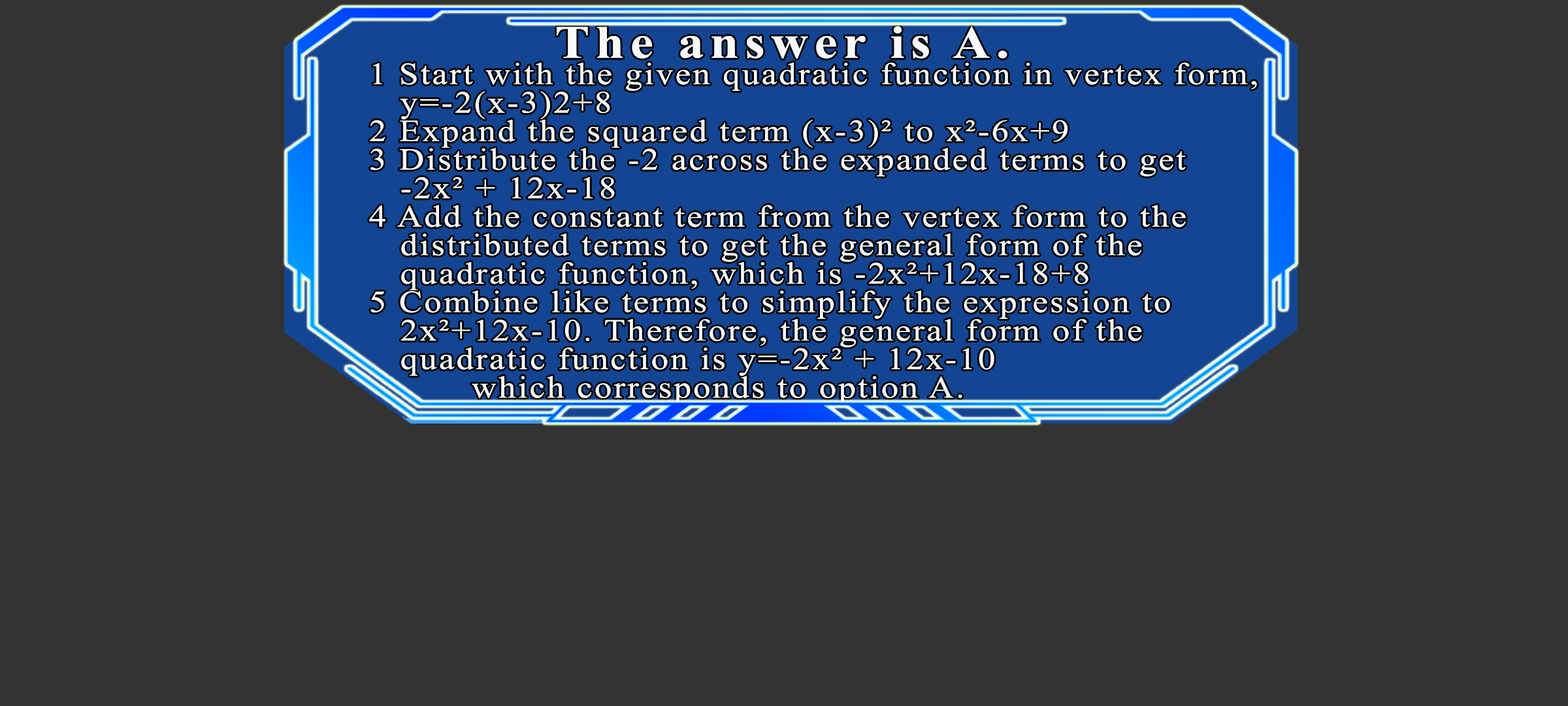
<style>
.page{position:relative;width:1568px;height:706px;background:#333333}
.page>*{position:absolute;margin:0}
.t1{font:46.3px "TimesNewRomanPS-BoldMT";letter-spacing:0.115em;color:#f7f9fb;scale:1.12 1}
.t2{font:30.9px/28.5px "TimesNewRomanPSMT";letter-spacing:0.06em;color:#f7f9fb;scale:1.12 1}
</style>
<div class="page">
<p class="t1" style="left:557px;top:26px;width:450px;height:33px">The answer is A.</p>
<p class="t2" style="left:369px;top:62px;width:888px;height:342px">1 Start with the given quadratic function in vertex form,<br>  y=-2(x-3)2+8<br>2 Expand the squared term (x-3)² to x²-6x+9<br>3 Distribute the -2 across the expanded terms to get<br>  -2x² + 12x-18<br>4 Add the constant term from the vertex form to the<br>  distributed terms to get the general form of the<br>  quadratic function, which is -2x²+12x-18+8<br>5 Combine like terms to simplify the expression to<br>  2x²+12x-10. Therefore, the general form of the<br>  quadratic function is y=-2x² + 12x-10<br>      which corresponds to option A.</p>
</div>
